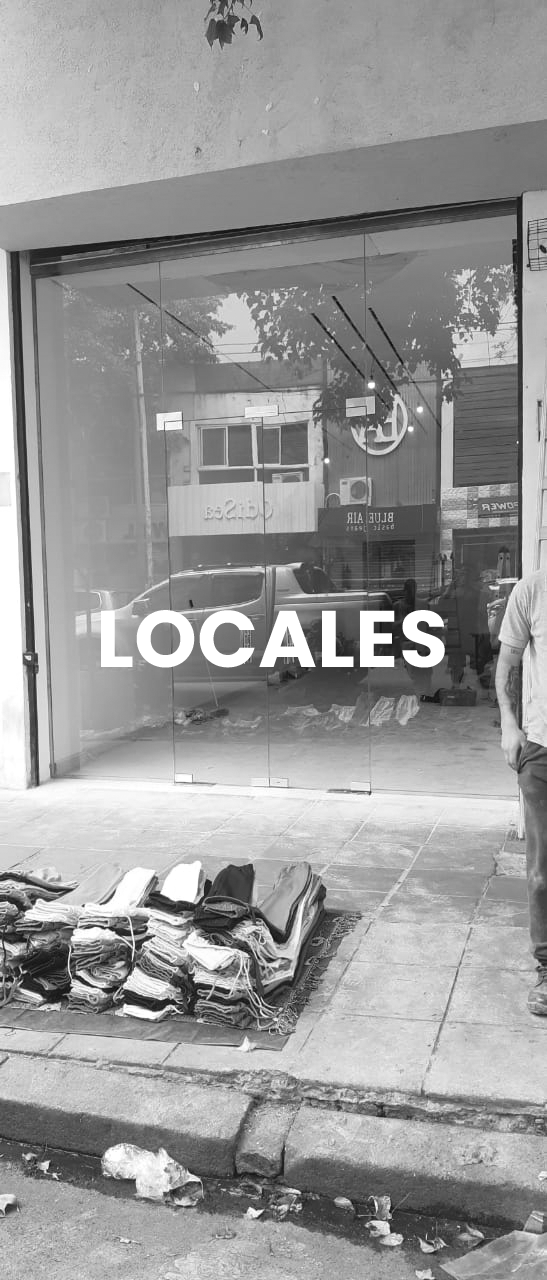
<style>
.page{position:relative;width:547px;height:1280px}
.page>*{position:absolute;margin:0}
.t1{font:80px "Poppins-Bold";color:#ffffff}
</style>
<div class="page">
<p class="t1" style="left:101px;top:610px;width:344px;height:58px">LOCALES</p>
</div>
